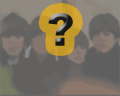
<style>
.page{position:relative;width:120px;height:96px}
.page>*{position:absolute;margin:0}
.t1{font:45px "Arial-Black"}
</style>
<div class="page">
<p class="t1" style="left:48px;top:13px;width:25px;height:33px">?</p>
</div>
